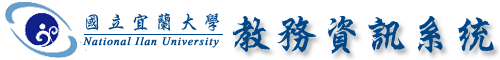
<style>
.page{position:relative;width:500px;height:60px;background:#ffffff}
.page>*{position:absolute;margin:0}
.t1{font:20px "SingkaiEG-Bold-Big5";letter-spacing:0.2em;color:#00478b}
.t2{font:45px "SingkaibeiEG-Bold-Big5";color:#00478b}
.t3{font:14px "Vijaya";letter-spacing:0.05em;color:#00478b;font-weight:bold}
</style>
<div class="page">
<p class="t1" style="left:86px;top:13px;width:133px;height:18px">國立宜蘭大學</p>
<p class="t2" style="left:232px;top:16px;width:262px;height:38px">教務資訊系統</p>
<p class="t3" style="left:83px;top:37px;width:136px;height:11px">National Ilan University</p>
</div>
